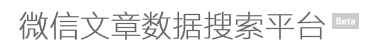
<style>
.page{position:relative;width:376px;height:52px;background:#ffffff}
.page>*{position:absolute;margin:0}
.t1{font:30px "FZLTCXHJW--GB1-0";color:#666666;font-weight:bold}
.t2{font:9.5px "Corbel";color:#ffffff;font-weight:bold;scale:1.03 1}
</style>
<div class="page">
<p class="t1" style="left:19px;top:11px;width:306px;height:29px">微信文章数据搜索平台</p>
<p class="t2" style="left:336px;top:17px;width:19px;height:8px">Beta</p>
</div>
